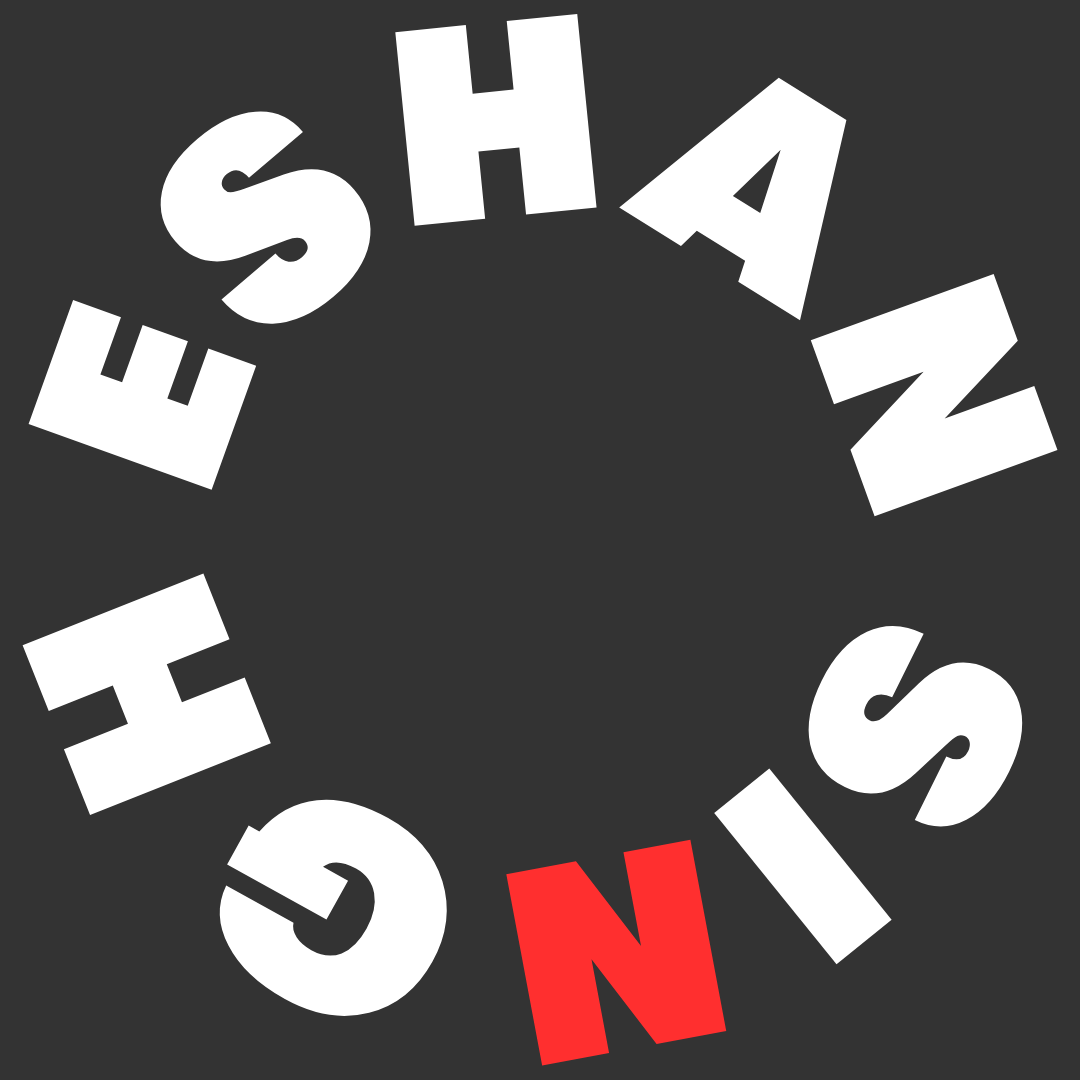
<style>
.page{position:relative;width:1080px;height:1080px;background:#333333}
.page>*{position:absolute;margin:0}
.t1{font:277.9px "GTWalsheimPro-UltraBold";color:#ffffff}
.t2{font:277.9px "GTWalsheimPro-UltraBold";color:#ff2f2f}
</style>
<div class="page">
<p class="t1" style="left:22px;top:14px;width:1036px;height:1052px">ESHAN SI<span class="t2">N</span>GH</p>
</div>
